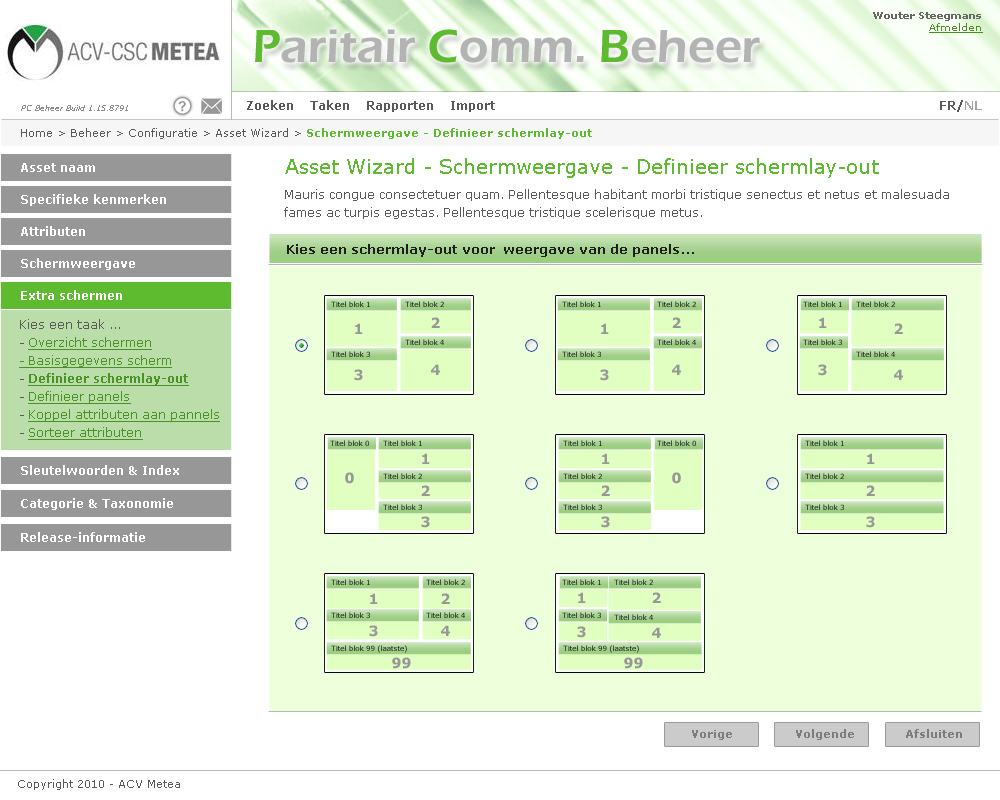
<style>
.page{position:relative;width:1000px;height:800px;background:#ffffff}
.page>*{position:absolute;margin:0}
.t1{font:10px "Verdana-Bold";color:#666666}
.t2{font:10px "Verdana";color:#488f24;text-decoration:underline}
.t3{font:48px "ErasITC-Demi";color:#b3b3b3}
.t4{font:48px "ErasITC-Demi";color:#5eba2f}
.t5{font:12px "Verdana-Bold";color:#595959}
.t6{font:12px "Verdana-Bold";color:#a4a4a4}
.t7{font:8px "Verdana-Italic";color:#8c8c8c}
.t8{font:11px "Verdana";color:#595959}
.t9{font:11px "Verdana-Bold";color:#5eba2f}
.t10{font:20px "Verdana";color:#5eba2f}
.t11{font:12px "Verdana-Bold";color:#ffffff}
.t12{font:12px/18px "Verdana";color:#595959}
.t13{font:13px "Verdana-Bold";color:#1e1e1e}
.t14{font:12px/18px "Verdana";color:#4a9225;text-decoration:underline}
.t15{font:12px/18px "Verdana-Bold";color:#4a9225;text-decoration:underline}
.t16{font:11px "Verdana-Bold";color:#7c7c7c}
</style>
<div class="page">
<p class="t1" style="left:873px;top:12px;width:110px;height:21px;text-align:right">Wouter Steegmans<br><span class="t2">Afmelden</span></p>
<p class="t3" style="left:255px;top:29px;width:505px;height:34px"><span class="t4">P</span>aritair <span class="t4">C</span>omm. <span class="t4">B</span>eheer</p>
<p class="t5" style="left:247px;top:100px;width:248px;height:12px">Zoeken    Taken    Rapporten    Import</p>
<p class="t5" style="left:940px;top:100px;width:42px;height:12px">FR/<span class="t6">NL</span></p>
<p class="t7" style="left:21px;top:105px;width:107px;height:6px">PC Beheer Build 1.15.8791</p>
<p class="t8" style="left:21px;top:128px;width:571px;height:11px">Home &gt; Beheer &gt; Configuratie &gt; Asset Wizard &gt; <span class="t9">Schermweergave - Definieer schermlay-out</span></p>
<p class="t10" style="left:285px;top:158px;width:594px;height:20px">Asset Wizard - Schermweergave - Definieer schermlay-out</p>
<p class="t11" style="left:21px;top:163px;width:74px;height:9px">Asset naam</p>
<p class="t11" style="left:21px;top:194px;width:145px;height:12px">Specifieke kenmerken</p>
<p class="t12" style="left:284px;top:189px;width:665px;height:30px">Mauris congue consectetuer quam. Pellentesque habitant morbi tristique senectus et netus et malesuada <br>fames ac turpis egestas. Pellentesque tristique scelerisque metus.</p>
<p class="t11" style="left:21px;top:226px;width:64px;height:10px">Attributen</p>
<p class="t13" style="left:287px;top:244px;width:407px;height:13px">Kies een schermlay-out voor  weergave van de panels...</p>
<p class="t11" style="left:21px;top:258px;width:114px;height:12px">Schermweergave</p>
<p class="t11" style="left:21px;top:290px;width:101px;height:10px">Extra schermen</p>
<p class="t14" style="left:19px;top:319px;width:201px;height:121px"><span class="t12">Kies een taak ...<br>- </span>Overzicht schermen<br>- Basisgegevens scherm<br><span class="t12">- </span><span class="t15">Definieer schermlay-out<br></span><span class="t12">- </span>Definieer panels<br><span class="t12">- </span>Koppel attributen aan pannels<br><span class="t12">- </span>Sorteer attributen</p>
<p class="t11" style="left:21px;top:465px;width:158px;height:10px">Sleutelwoorden &amp; Index</p>
<p class="t11" style="left:21px;top:498px;width:152px;height:12px">Categorie &amp; Taxonomie</p>
<p class="t11" style="left:21px;top:532px;width:124px;height:10px">Release-informatie</p>
<p class="t16" style="left:692px;top:730px;width:40px;height:10px">Vorige</p>
<p class="t16" style="left:796px;top:729px;width:58px;height:11px">Volgende</p>
<p class="t16" style="left:906px;top:729px;width:56px;height:9px">Afsluiten</p>
<p class="t8" style="left:18px;top:779px;width:162px;height:11px">Copyright 2010 - ACV Metea</p>
</div>
